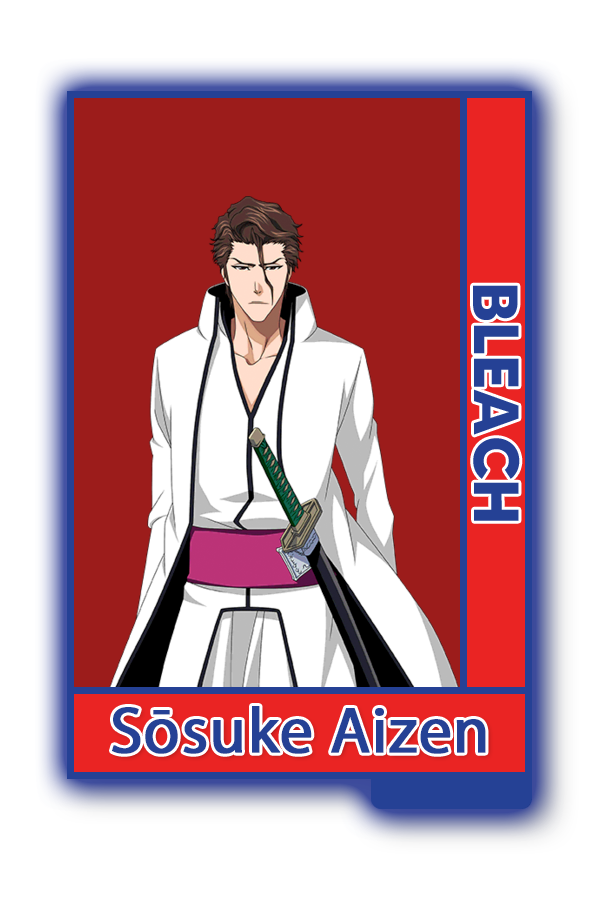
<style>
.page{position:relative;width:600px;height:900px;background:#ffffff}
.page>*{position:absolute;margin:0}
.t1{font:63.6px "MADETOMMY-Bold";color:#254195}
.t2{font:65.4px "MyriadPro-Regular";color:#254195;font-weight:bold}
</style>
<div class="page">
<p class="t1" style="left:473px;top:285px;width:47px;height:236px;rotate:90deg">BLEACH</p>
<p class="t2" style="left:112px;top:706px;width:374px;height:48px">Sōsuke Aizen</p>
</div>
